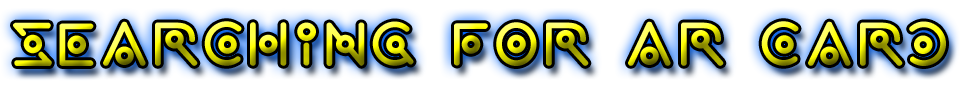
<style>
.page{position:relative;width:960px;height:86px;background:#ffffff}
.page>*{position:absolute;margin:0}
.t1{font:62.5px "wearealien!!"}
</style>
<div class="page">
<p class="t1" style="left:13px;top:21px;width:933px;height:45px">Searching for AR Card</p>
</div>
